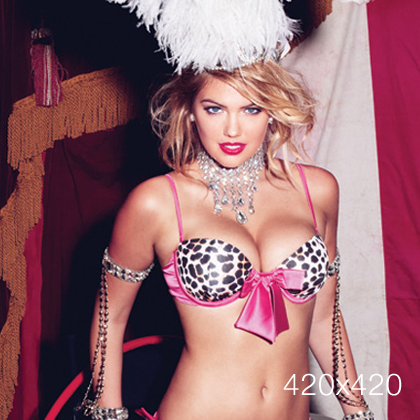
<style>
.page{position:relative;width:420px;height:420px}
.page>*{position:absolute;margin:0}
.t1{font:30px "HelveticaNeue-Light";letter-spacing:0.025em;color:#ffffff}
</style>
<div class="page">
<p class="t1" style="left:283px;top:373px;width:119px;height:23px">420x420</p>
</div>
